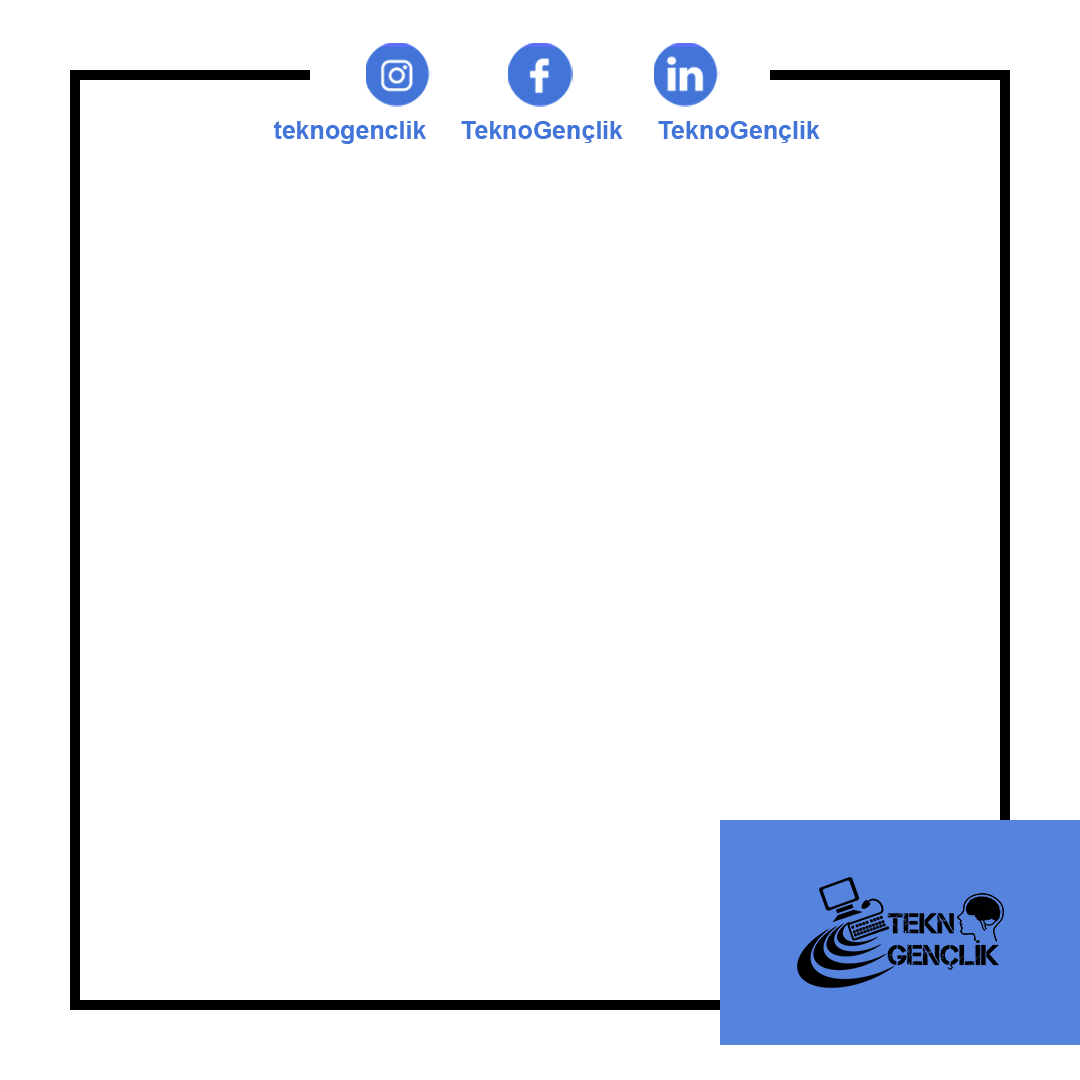
<style>
.page{position:relative;width:1080px;height:1080px;background:#ffffff}
.page>*{position:absolute;margin:0}
.t1{font:25px "Arial-BoldMT";color:#4375d9}
</style>
<div class="page">
<p class="t1" style="left:273px;top:121px;width:547px;height:23px">teknogenclik     TeknoGençlik     TeknoGençlik</p>
</div>
